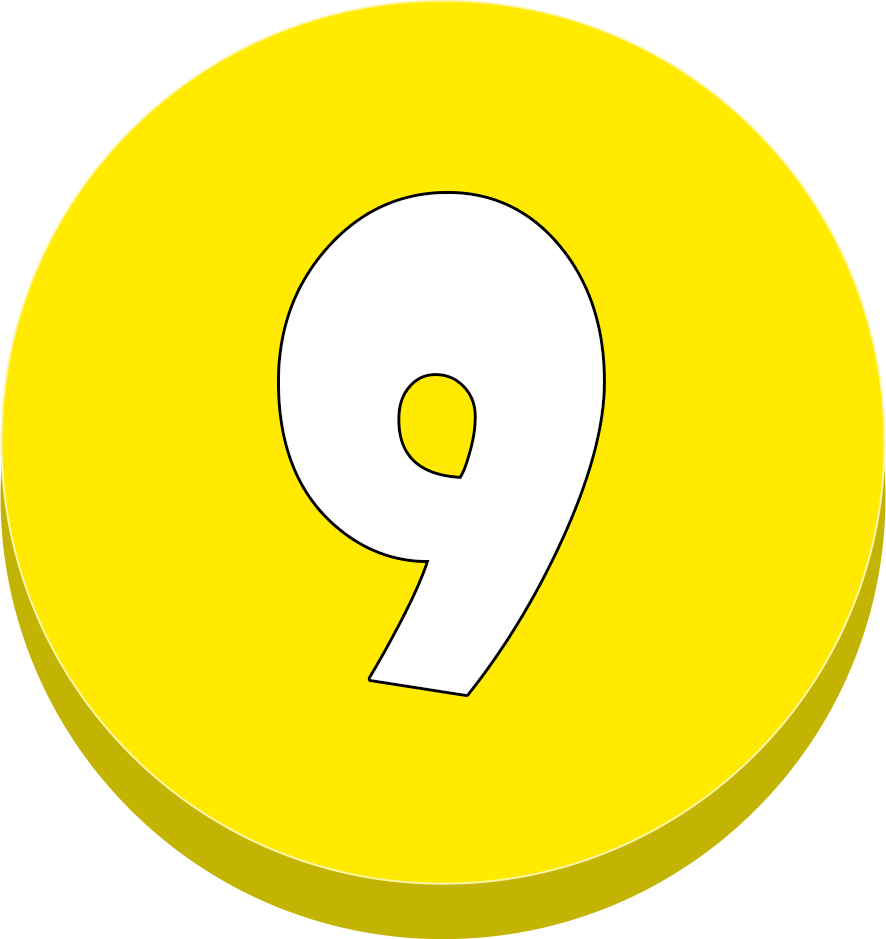
<style>
.page{position:relative;width:886px;height:939px;background:#ffea00}
.page>*{position:absolute;margin:0}
.t1{font:637.2px "ShowcardGothic-Reg";color:#ffffff}
</style>
<div class="page">
<p class="t1" style="left:280px;top:194px;width:323px;height:500px">9</p>
</div>
